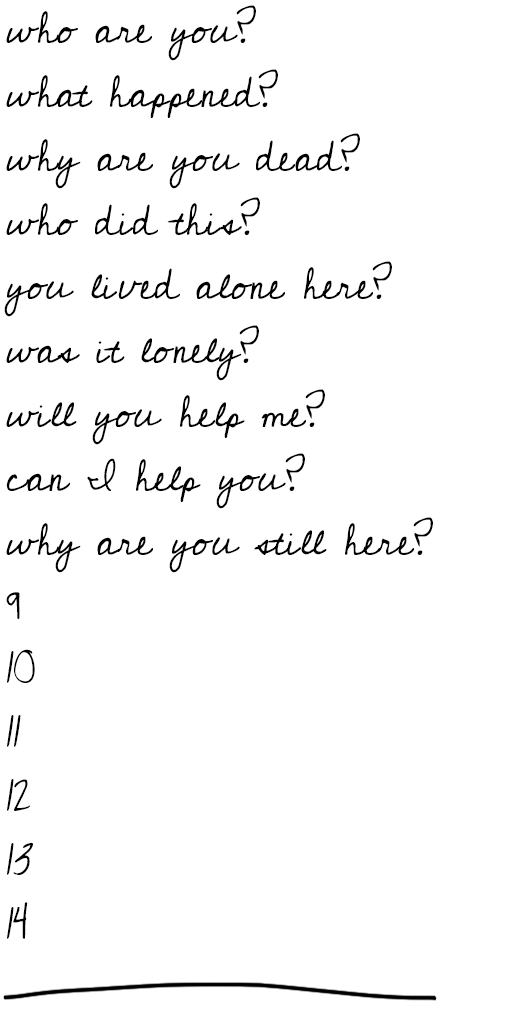
<style>
.page{position:relative;width:512px;height:1024px;background:#ffffff}
.page>*{position:absolute;margin:0}
.t1{font:44px/64px "Cedarville-Cursive";color:#000000;scale:0.95 1}
</style>
<div class="page">
<p class="t1" style="left:4px;top:5px;width:429px;height:934px">who are you?<br>what happened?<br>why are you dead?<br>who did this?<br>you lived alone here?<br>was it lonely?<br>will you help me?<br>can I help you?<br>why are you still here?<br>9<br>10<br>11<br>12<br>13<br>14</p>
</div>
